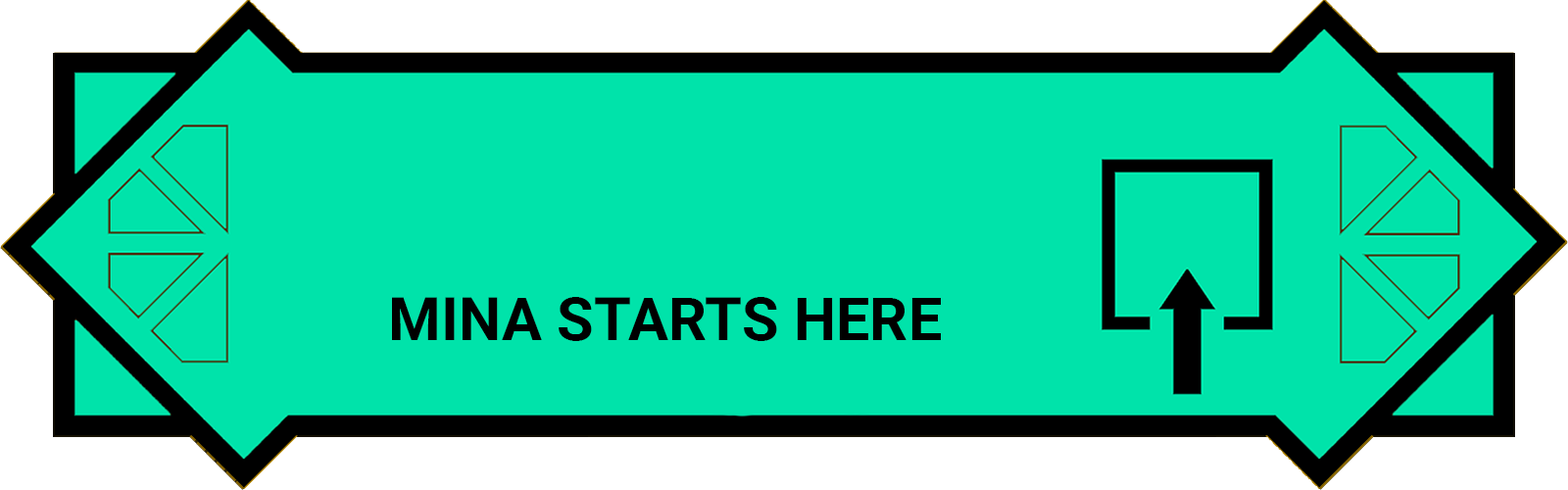
<style>
.page{position:relative;width:1568px;height:490px;background:#00e3aa}
.page>*{position:absolute;margin:0}
.t1{font:60.1px "Roboto-Bold";color:#000000}
</style>
<div class="page">
<p class="t1" style="left:392px;top:297px;width:549px;height:44px">MINA STARTS HERE</p>
</div>
